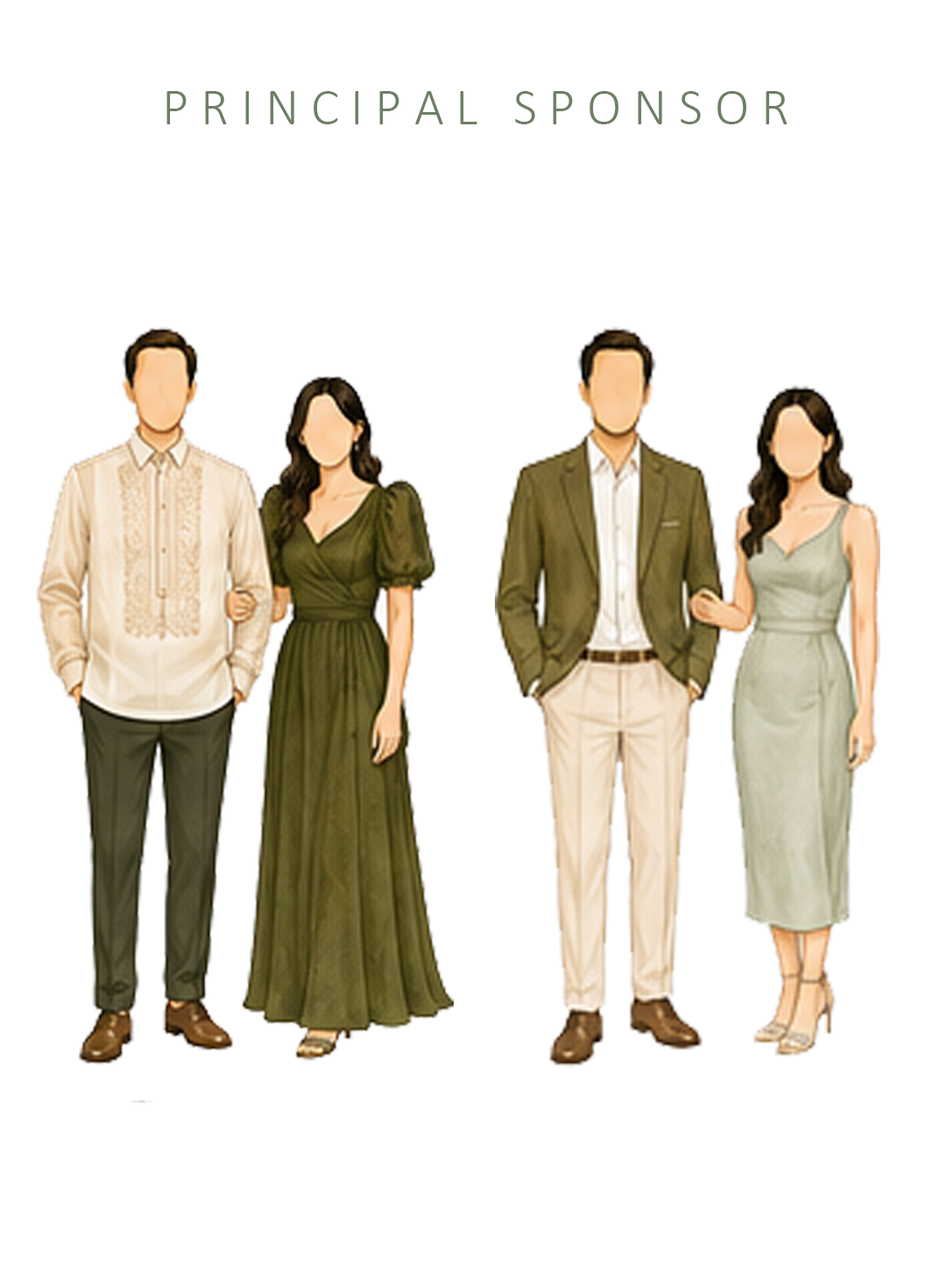
<style>
.page{position:relative;width:946px;height:1261px;background:#ffffff}
.page>*{position:absolute;margin:0}
.t1{font:52.5px "Calibri-Light";color:#6e7f65}
</style>
<div class="page">
<p class="t1" style="left:166px;top:91px;width:621px;height:33px">P R I N C I P A L   S P O N S O R</p>
</div>
